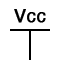
<style>
.page{position:relative;width:60px;height:60px;background:#ffffff}
.page>*{position:absolute;margin:0}
.t1{font:18px "Helvetica";letter-spacing:0.025em;color:#000000;font-weight:bold}
</style>
<div class="page">
<p class="t1" style="left:14px;top:9px;width:32px;height:14px">Vcc</p>
</div>
